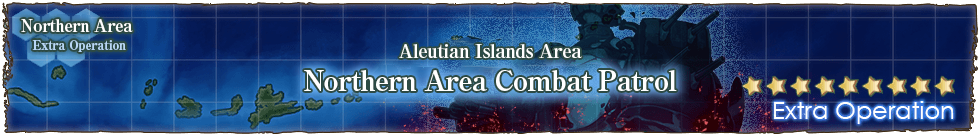
<style>
.page{position:relative;width:980px;height:136px}
.page>*{position:absolute;margin:0}
.t1{font:13px/22px "RyuminPro-ExBold";letter-spacing:-0.04em;color:#b9d7f5}
.t2{font:17px/22px "RyuminPro-ExBold";letter-spacing:-0.04em;color:#ffffff}
.t3{font:19px "RyuminPro-ExBold";letter-spacing:-0.04em;color:#ffffff}
.t4{font:28px "RyuminPro-ExBold";letter-spacing:-0.04em;color:#ffffff}
</style>
<div class="page">
<p class="t1" style="left:21px;top:19px;width:112px;height:33px"><span class="t2">Northern Area<br>　　</span>Extra Operation</p>
<p class="t3" style="left:399px;top:44px;width:183px;height:15px">Aleutian Islands Area</p>
<p class="t4" style="left:304px;top:70px;width:373px;height:21px">Northern Area Combat Patrol</p>
</div>
